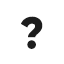
<style>
.page{position:relative;width:64px;height:64px;background:#ffffff}
.page>*{position:absolute;margin:0}
.t1{font:44px "Gilroy-ExtraBold";letter-spacing:0.05em;color:#1d1d1d}
</style>
<div class="page">
<p class="t1" style="left:21px;top:16px;width:22px;height:33px">?</p>
</div>
